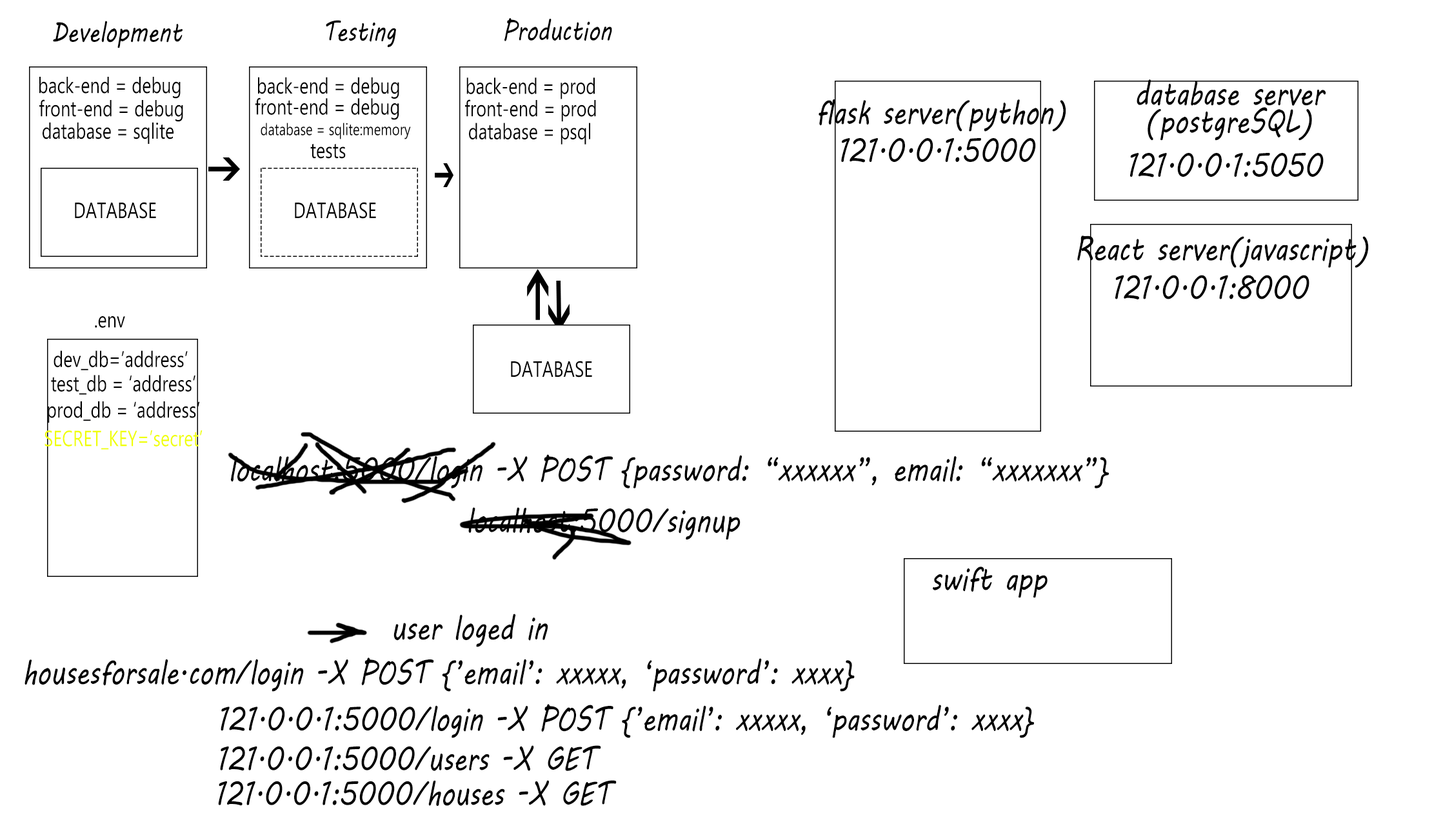
<style>
.page{position:relative;width:1432px;height:833px;background:#ffffff}
.page>*{position:absolute;margin:0}
.t1{font:27.7px "MVBoli";color:#010101;scale:0.79 1}
.t2{font:27.7px "MVBoli";color:#000000;scale:0.79 1}
.t3{font:22.1px "MicrosoftPhagsPa";color:#000000;scale:0.79 1}
.t4{font:33.2px "MVBoli";color:#000000;scale:0.79 1}
.t5{font:16.6px "MicrosoftPhagsPa";color:#000000;scale:0.79 1}
.t6{font:22.1px "MicrosoftPhagsPa";color:#f0ff08;scale:0.79 1}
</style>
<div class="page">
<p class="t1" style="left:53px;top:21px;width:130px;height:27px">Development</p>
<p class="t2" style="left:326px;top:20px;width:70px;height:27px">Testing</p>
<p class="t2" style="left:504px;top:18px;width:108px;height:23px">Production</p>
<p class="t3" style="left:39px;top:77px;width:142px;height:22px">back-end = debug</p>
<p class="t3" style="left:258px;top:77px;width:141px;height:22px">back-end = debug</p>
<p class="t3" style="left:466px;top:77px;width:129px;height:22px">back-end = prod</p>
<p class="t4" style="left:1137px;top:79px;width:189px;height:62px;text-align:center">database server<br>(postgreSQL)</p>
<p class="t3" style="left:39px;top:99px;width:144px;height:23px">front-end = debug</p>
<p class="t3" style="left:255px;top:97px;width:144px;height:23px">front-end = debug</p>
<p class="t3" style="left:465px;top:99px;width:131px;height:23px">front-end = prod</p>
<p class="t4" style="left:819px;top:99px;width:247px;height:33px">flask server(python)</p>
<p class="t3" style="left:43px;top:122px;width:131px;height:22px">database = sqlite</p>
<p class="t5" style="left:261px;top:123px;width:150px;height:16px">database = sqlite:memory</p>
<p class="t3" style="left:469px;top:123px;width:121px;height:21px">database = psql</p>
<p class="t3" style="left:310px;top:144px;width:36px;height:15px">tests</p>
<p class="t4" style="left:841px;top:138px;width:195px;height:25px">121.0.0.1:5000</p>
<p class="t4" style="left:1130px;top:153px;width:194px;height:24px">121.0.0.1:5050</p>
<p class="t3" style="left:75px;top:202px;width:81px;height:17px">DATABASE</p>
<p class="t3" style="left:295px;top:202px;width:81px;height:17px">DATABASE</p>
<p class="t4" style="left:1077px;top:235px;width:292px;height:33px">React server(javascript)</p>
<p class="t4" style="left:1115px;top:275px;width:194px;height:24px">121.0.0.1:8000</p>
<p class="t3" style="left:95px;top:316px;width:30px;height:12px">.env</p>
<p class="t3" style="left:54px;top:350px;width:134px;height:20px">dev_db=’address’</p>
<p class="t3" style="left:511px;top:361px;width:81px;height:16px">DATABASE</p>
<p class="t3" style="left:51px;top:375px;width:144px;height:20px">test_db = ‘address’</p>
<p class="t3" style="left:48px;top:401px;width:152px;height:22px">prod_db = ‘address’</p>
<p class="t6" style="left:45px;top:430px;width:158px;height:20px">SECRET_KEY=’secret’</p>
<p class="t4" style="left:231px;top:454px;width:878px;height:34px">localhost:5000/login -X POST {password: “xxxxxx”, email: “xxxxxxx”}</p>
<p class="t4" style="left:468px;top:507px;width:272px;height:33px">localhost:5000/signup</p>
<p class="t4" style="left:933px;top:566px;width:115px;height:32px">swift app</p>
<p class="t4" style="left:393px;top:613px;width:155px;height:34px">user loged in</p>
<p class="t4" style="left:25px;top:657px;width:830px;height:34px">housesforsale.com/login -X POST {’email’: xxxxx, ‘password’: xxxx}</p>
<p class="t4" style="left:221px;top:704px;width:813px;height:34px">121.0.0.1:5000/login -X POST {’email’: xxxxx, ‘password’: xxxx}</p>
<p class="t4" style="left:220px;top:745px;width:381px;height:26px">121.0.0.1:5000/users -X GET</p>
<p class="t4" style="left:218px;top:780px;width:399px;height:26px">121.0.0.1:5000/houses -X GET</p>
</div>
